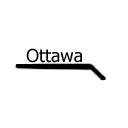
<style>
.page{position:relative;width:128px;height:128px;background:#ffffff}
.page>*{position:absolute;margin:0}
.t1{font:17.9px "Tahoma";color:#000000}
</style>
<div class="page">
<p class="t1" style="left:26px;top:48px;width:56px;height:15px">Ottawa</p>
</div>
